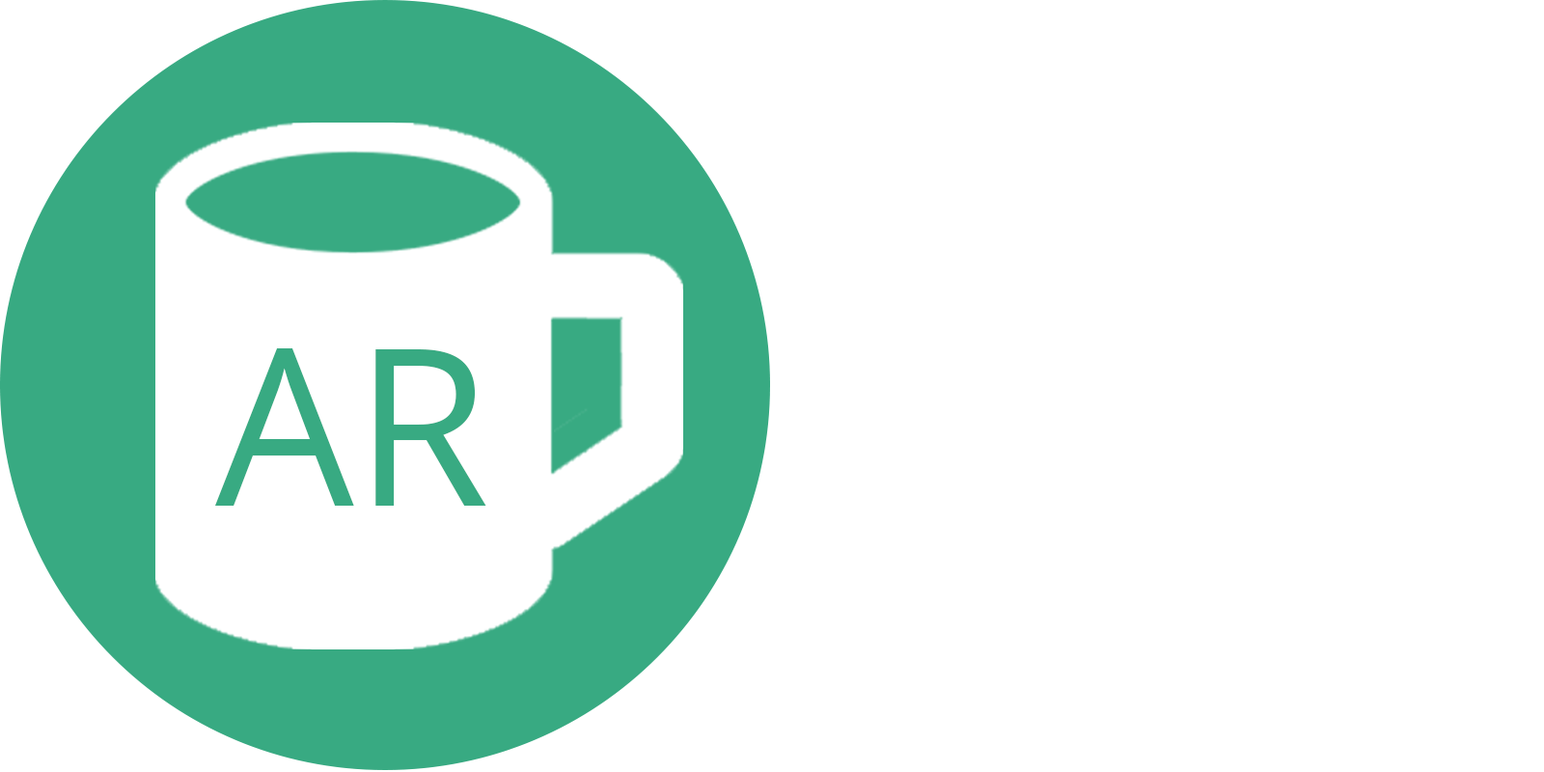
<style>
.page{position:relative;width:1544px;height:772px;background:#ffffff}
.page>*{position:absolute;margin:0}
.t1{font:218.9px "OpenSans-Regular";color:#38aa82}
</style>
<div class="page">
<p class="t1" style="left:215px;top:348px;width:271px;height:158px">AR</p>
</div>
